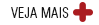
<style>
.page{position:relative;width:99px;height:25px;background:#ffffff}
.page>*{position:absolute;margin:0}
.t1{font:14px "Helvetica-Condensed-Light";letter-spacing:0.025em;color:#191919}
</style>
<div class="page">
<p class="t1" style="left:11px;top:7px;width:58px;height:11px">VEJA MAIS</p>
</div>
